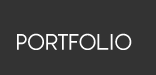
<style>
.page{position:relative;width:156px;height:75px;background:#333333}
.page>*{position:absolute;margin:0}
.t1{font:21.3px "WatchwordRegularDemo";color:#ffffff}
</style>
<div class="page">
<p class="t1" style="left:17px;top:33px;width:115px;height:17px">PORTFOLIO</p>
</div>
